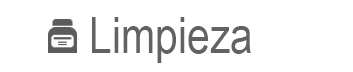
<style>
.page{position:relative;width:353px;height:72px;background:#ffffff}
.page>*{position:absolute;margin:0}
.t1{font:50px "ArialNarrow";color:#626262}
</style>
<div class="page">
<p class="t1" style="left:92px;top:17px;width:159px;height:46px">Limpieza</p>
</div>
